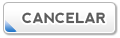
<style>
.page{position:relative;width:120px;height:38px;background:#ffffff}
.page>*{position:absolute;margin:0}
.t1{font:14px "nevis-Bold";color:#5c5c5c}
</style>
<div class="page">
<p class="t1" style="left:22px;top:12px;width:84px;height:12px">CANCELAR</p>
</div>
